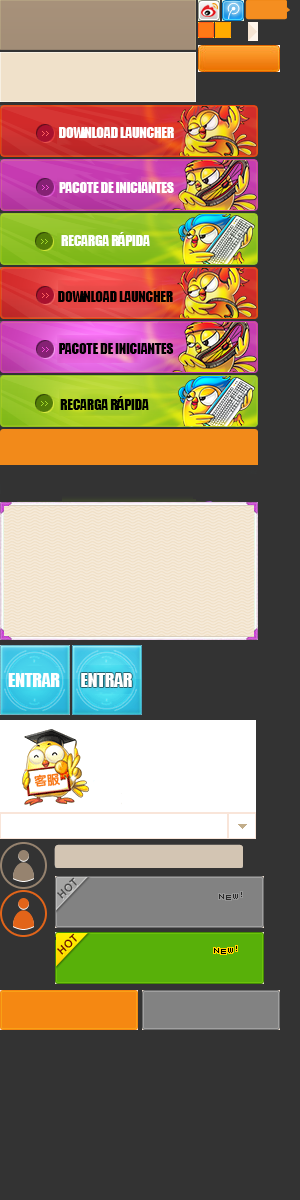
<style>
.page{position:relative;width:300px;height:1200px;background:#333333}
.page>*{position:absolute;margin:0}
.t1{font:14px "Impact";letter-spacing:-0.025em;color:#ffffff}
.t2{font:14px "Impact";letter-spacing:-0.025em;color:#000000}
.t3{font:18px "Impact";letter-spacing:-0.025em;color:#ffffff}
</style>
<div class="page">
<p class="t1" style="left:59px;top:127px;width:115px;height:11px">DOWNLOAD LAUNCHER</p>
<p class="t1" style="left:59px;top:182px;width:115px;height:11px">PACOTE DE INICIANTES</p>
<p class="t1" style="left:61px;top:232px;width:89px;height:14px">RECARGA RÁPIDA</p>
<p class="t2" style="left:58px;top:291px;width:115px;height:11px">DOWNLOAD LAUNCHER</p>
<p class="t2" style="left:59px;top:343px;width:115px;height:11px">PACOTE DE INICIANTES</p>
<p class="t2" style="left:60px;top:396px;width:89px;height:14px">RECARGA RÁPIDA</p>
<p class="t3" style="left:8px;top:673px;width:52px;height:14px">ENTRAR</p>
<p class="t3" style="left:81px;top:673px;width:51px;height:14px">ENTRAR</p>
</div>
